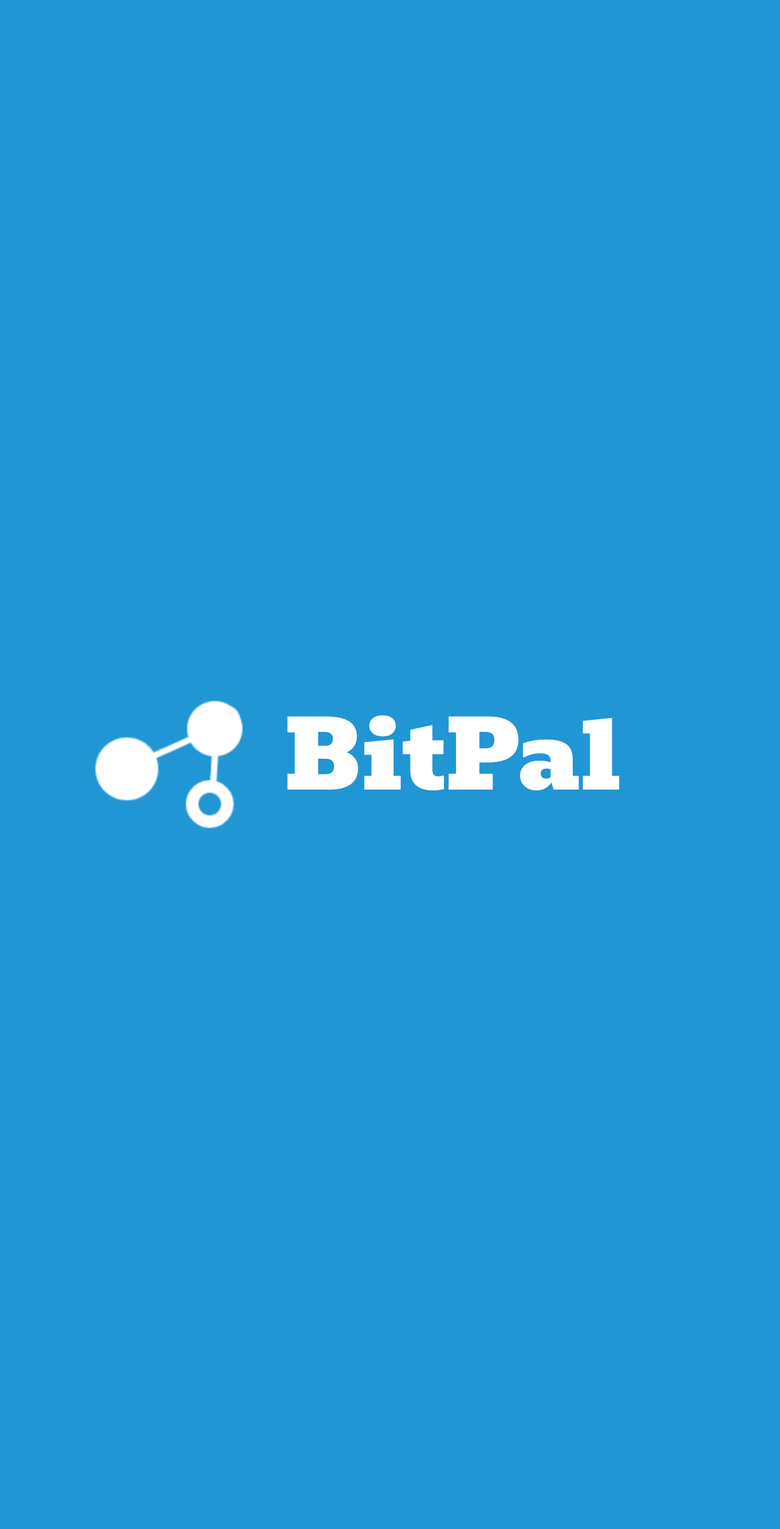
<style>
.page{position:relative;width:780px;height:1529px;background:#2096d4}
.page>*{position:absolute;margin:0}
.t1{font:94.2px "Bevan-Regular";color:#ffffff}
</style>
<div class="page">
<p class="t1" style="left:287px;top:715px;width:332px;height:76px">BitPal</p>
</div>
